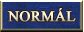
<style>
.page{position:relative;width:84px;height:32px}
.page>*{position:absolute;margin:0}
.t1{font:18px "ShonarBangla";text-transform:uppercase;font-weight:bold}
</style>
<div class="page">
<p class="t1" style="left:7px;top:8px;width:69px;height:14px">normál</p>
</div>
